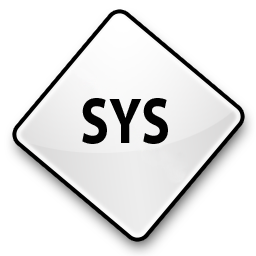
<style>
.page{position:relative;width:256px;height:256px;background:#ffffff}
.page>*{position:absolute;margin:0}
.t1{font:66px "MyriadPro-Bold";letter-spacing:0.005em;color:#010101;scale:0.82 1}
</style>
<div class="page">
<p class="t1" style="left:82px;top:98px;width:86px;height:46px">SYS</p>
</div>
